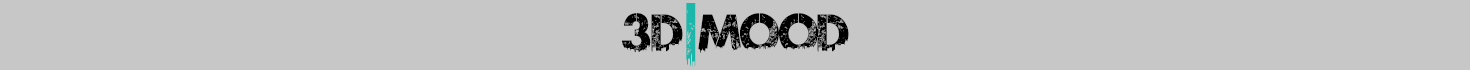
<style>
.page{position:relative;width:1470px;height:70px;background:#c7c7c7}
.page>*{position:absolute;margin:0}
.t1{font:89.6px "UrbanJungleDEMO";color:#1cb8ab;scale:0.55 1}
.t2{font:50px "UrbanJungleDEMO";color:#000000}
</style>
<div class="page">
<p class="t1" style="left:686px;top:3px;width:10px;height:64px">I</p>
<p class="t2" style="left:622px;top:13px;width:227px;height:40px">3D   MOOD</p>
</div>
